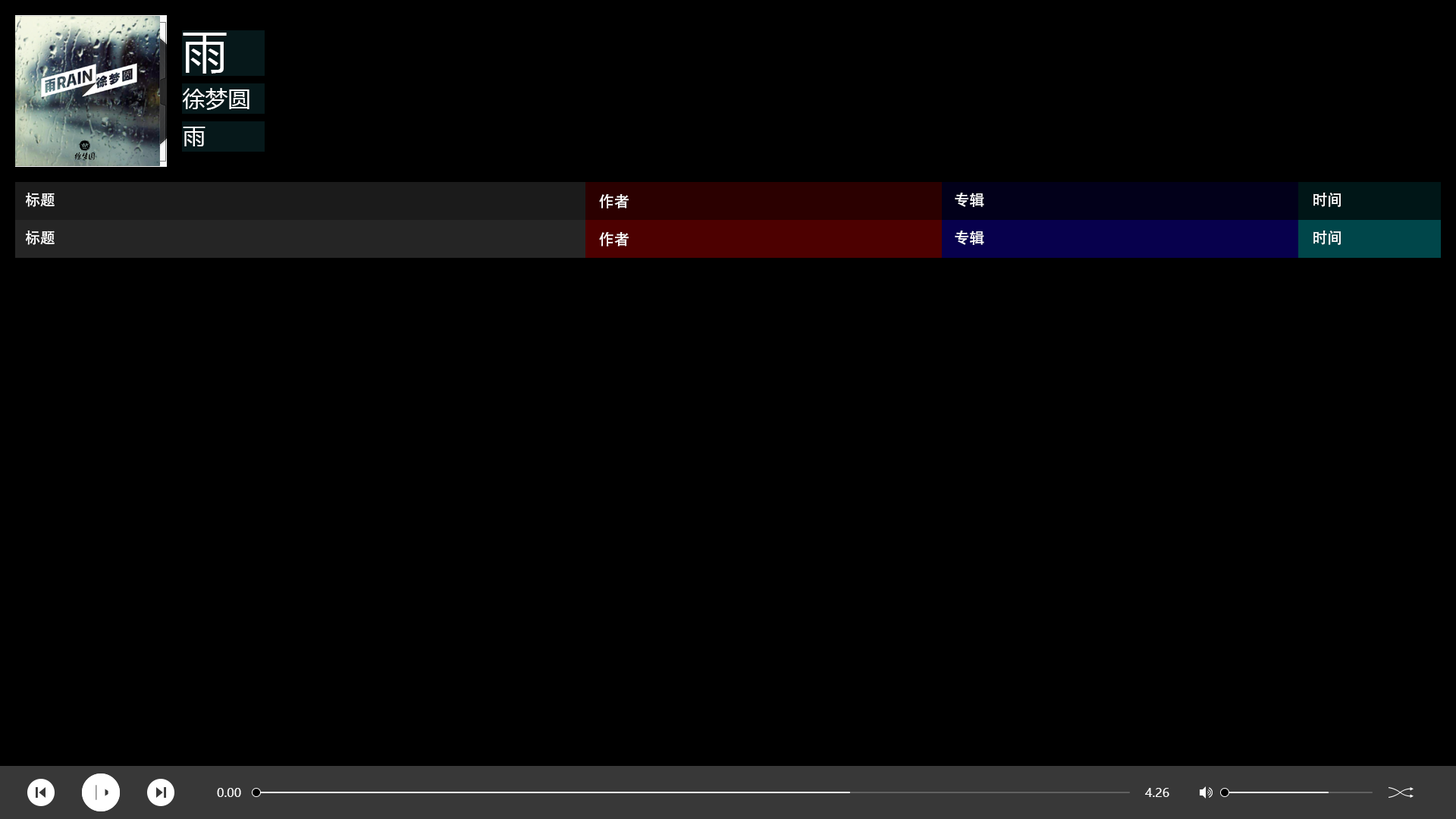
<style>
.page{position:relative;width:1456px;height:819px;background:#000000}
.page>*{position:absolute;margin:0}
.t1{font:45.5px "MicrosoftYaHei";color:#ffffff}
.t2{font:22.7px "MicrosoftYaHei";color:#ffffff}
.t3{font:15.2px "AdobeHeitiStd-Regular";color:#ffffff}
.t4{font:12.1px "MicrosoftYaHei";color:#ffffff}
</style>
<div class="page">
<p class="t1" style="left:183px;top:33px;width:44px;height:41px">雨</p>
<p class="t2" style="left:182px;top:88px;width:67px;height:22px">徐梦圆</p>
<p class="t2" style="left:183px;top:127px;width:23px;height:19px">雨</p>
<p class="t3" style="left:25px;top:193px;width:30px;height:14px">标题</p>
<p class="t3" style="left:599px;top:194px;width:30px;height:15px">作者</p>
<p class="t3" style="left:955px;top:193px;width:29px;height:14px">专辑</p>
<p class="t3" style="left:1313px;top:193px;width:28px;height:14px">时间</p>
<p class="t3" style="left:25px;top:231px;width:30px;height:14px">标题</p>
<p class="t3" style="left:599px;top:232px;width:30px;height:14px">作者</p>
<p class="t3" style="left:955px;top:231px;width:29px;height:14px">专辑</p>
<p class="t3" style="left:1313px;top:231px;width:28px;height:14px">时间</p>
<p class="t4" style="left:217px;top:788px;width:24px;height:9px">0.00</p>
<p class="t4" style="left:1145px;top:788px;width:24px;height:9px">4.26</p>
</div>
